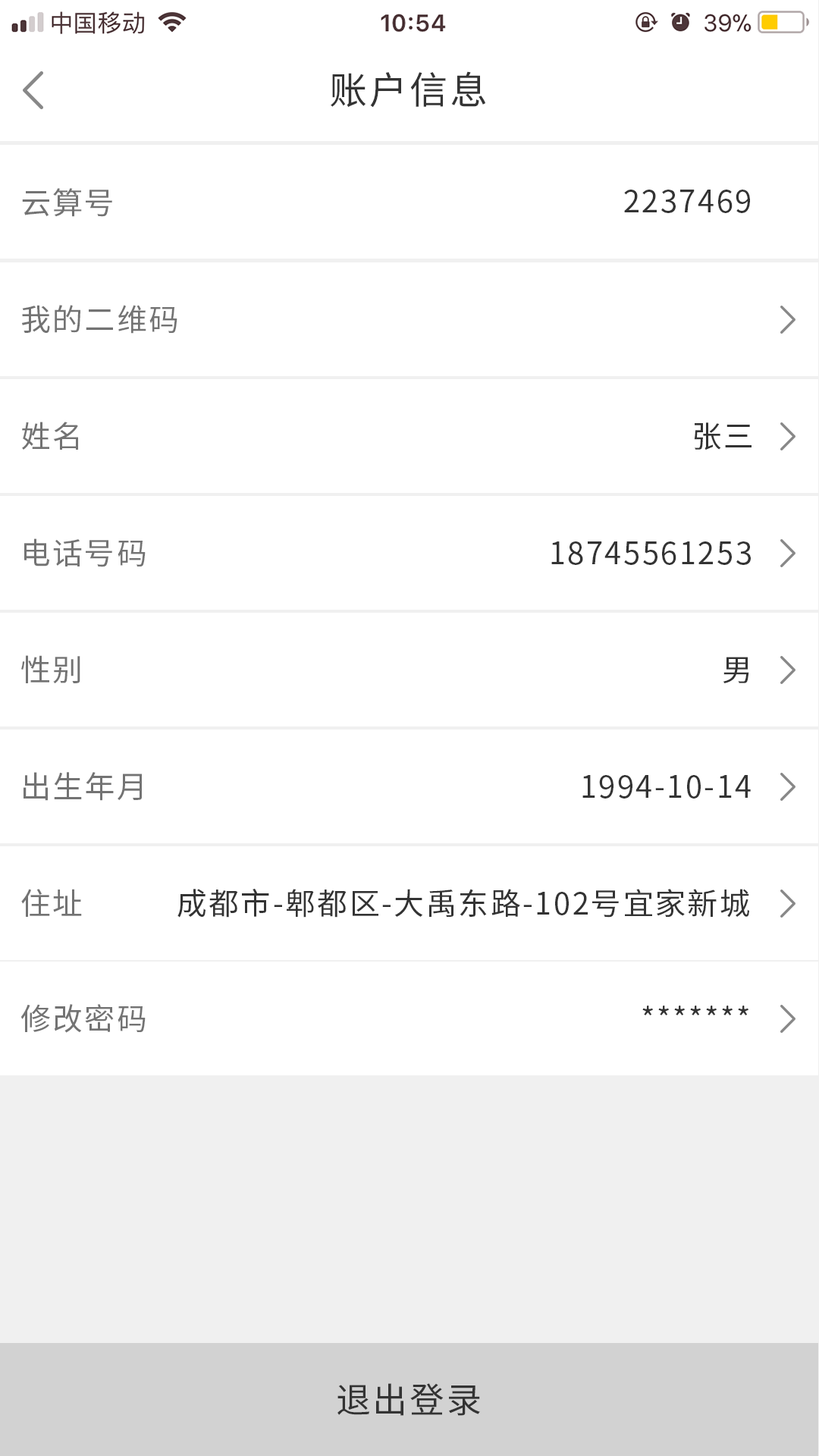
<style>
.page{position:relative;width:819px;height:1456px;background:#ffffff}
.page>*{position:absolute;margin:0}
.t1{font:37.9px "SourceHanSansCN-Regular";letter-spacing:0.06em;color:#333333}
.t2{font:30.3px "SourceHanSansCN-Regular";letter-spacing:0.06em;color:#737373}
.t3{font:30.3px "SourceHanSansCN-Regular";letter-spacing:0.06em;color:#333333}
.t4{font:34.9px "SourceHanSansCN-Regular";letter-spacing:0.06em;color:#333333}
</style>
<div class="page">
<p class="t1" style="left:331px;top:71px;width:154px;height:37px">账户信息</p>
<p class="t2" style="left:22px;top:188px;width:90px;height:29px">云算号</p>
<p class="t3" style="left:624px;top:190px;width:126px;height:23px">2237469</p>
<p class="t2" style="left:22px;top:305px;width:155px;height:29px">我的二维码</p>
<p class="t2" style="left:22px;top:422px;width:56px;height:28px">姓名</p>
<p class="t3" style="left:694px;top:422px;width:57px;height:28px">张三</p>
<p class="t2" style="left:24px;top:538px;width:122px;height:29px">电话号码</p>
<p class="t3" style="left:551px;top:541px;width:200px;height:24px">18745561253</p>
<p class="t2" style="left:21px;top:655px;width:59px;height:28px">性别</p>
<p class="t3" style="left:723px;top:657px;width:26px;height:26px">男</p>
<p class="t2" style="left:24px;top:772px;width:118px;height:29px">出生年月</p>
<p class="t3" style="left:582px;top:775px;width:169px;height:24px">1994-10-14</p>
<p class="t2" style="left:21px;top:889px;width:61px;height:28px">住址</p>
<p class="t3" style="left:177px;top:889px;width:572px;height:29px">成都市-郫都区-大禹东路-102号宜家新城</p>
<p class="t2" style="left:20px;top:1004px;width:126px;height:29px">修改密码</p>
<p class="t3" style="left:642px;top:1006px;width:106px;height:9px">*******</p>
<p class="t4" style="left:337px;top:1383px;width:143px;height:33px">退出登录</p>
</div>
